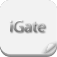
<style>
.page{position:relative;width:57px;height:57px;background:#f2f2f2}
.page>*{position:absolute;margin:0}
.t1{font:16.7px "MyriadPro-Regular"}
</style>
<div class="page">
<p class="t1" style="left:9px;top:20px;width:36px;height:12px">iGate</p>
</div>
